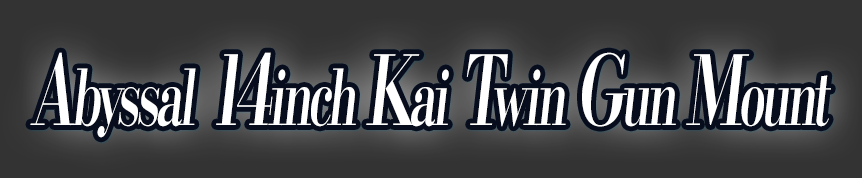
<style>
.page{position:relative;width:862px;height:178px;background:#333333}
.page>*{position:absolute;margin:0}
.t1{font:76.8px "KochoStd-Heavy";letter-spacing:-0.08em;color:#ffffff;font-style:italic;scale:0.63 1}
.t2{font:96px "KochoStd-Heavy";letter-spacing:-0.08em;color:#ffffff;font-style:italic;scale:0.63 1}
</style>
<div class="page">
<p class="t1" style="left:30px;top:52px;width:801px;height:86px"><span class="t2">A</span>byssal<span class="t2"> 14</span>inch <span class="t2">K</span>ai<span class="t2"> T</span>win <span class="t2">G</span>un <span class="t2">M</span>ount</p>
</div>
